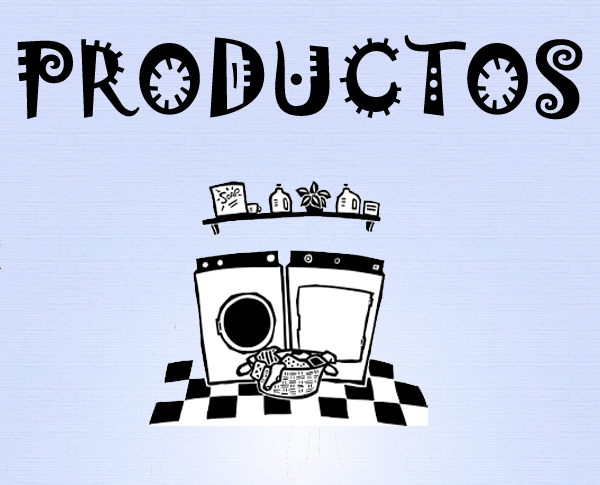
<style>
.page{position:relative;width:600px;height:485px}
.page>*{position:absolute;margin:0}
.t1{font:90px "Jokerman-Regular";color:#000001}
</style>
<div class="page">
<p class="t1" style="left:17px;top:35px;width:566px;height:85px">PRODUCTOS</p>
</div>
